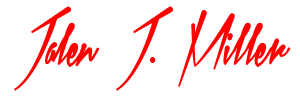
<style>
.page{position:relative;width:300px;height:100px;background:#ffffff}
.page>*{position:absolute;margin:0}
.t1{font:40px "XtreemFatDemo";color:#ff0000;scale:0.96 1}
</style>
<div class="page">
<p class="t1" style="left:14px;top:6px;width:277px;height:85px">Jalen J. Miller</p>
</div>
